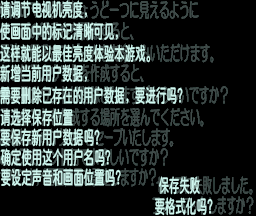
<style>
.page{position:relative;width:256px;height:216px;background:#000000}
.page>*{position:absolute;margin:0}
.t1{font:19px/22px "ChillRoundFBold";color:#d0f8f0}
.t2{font:19px "ChillRoundFBold";color:#d0f8f0}
</style>
<div class="page">
<p class="t1" style="left:0px;top:0px;width:151px;height:63px">请调节电视机亮度，<br>使画面中的标记清晰可见，<br>这样就能以最佳亮度体验本游戏。</p>
<p class="t1" style="left:0px;top:64px;width:183px;height:41px">新增当前用户数据，<br>需要删除已存在的用户数据，要进行吗？</p>
<p class="t2" style="left:0px;top:108px;width:73px;height:19px">请选择保存位置</p>
<p class="t2" style="left:0px;top:128px;width:100px;height:19px">要保存新用户数据吗？</p>
<p class="t2" style="left:0px;top:148px;width:111px;height:19px">确定使用这个用户名吗？</p>
<p class="t2" style="left:1px;top:168px;width:120px;height:19px">要设定声音和画面位置吗？</p>
<p class="t2" style="left:158px;top:176px;width:42px;height:19px">保存失败</p>
<p class="t2" style="left:155px;top:197px;width:58px;height:19px">要格式化吗？</p>
</div>
